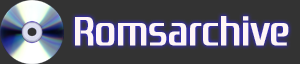
<style>
.page{position:relative;width:300px;height:64px;background:#333333}
.page>*{position:absolute;margin:0}
.t1{font:40px "ZrnicRg-Regular";color:#fef5f6;font-weight:bold}
</style>
<div class="page">
<p class="t1" style="left:75px;top:16px;width:214px;height:30px">Romsarchive</p>
</div>
